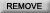
<style>
.page{position:relative;width:50px;height:13px}
.page>*{position:absolute;margin:0}
.t1{font:8.1px "ArialMT";color:#000000;text-transform:uppercase}
</style>
<div class="page">
<p class="t1" style="left:7px;top:3px;width:35px;height:7px">Remove</p>
</div>
